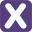
<style>
.page{position:relative;width:32px;height:32px;background:#563d7c}
.page>*{position:absolute;margin:0}
.t1{font:46.2px "ArialRoundedMTBold";color:#f4fef8}
</style>
<div class="page">
<p class="t1" style="left:4px;top:3px;width:23px;height:26px">x</p>
</div>
